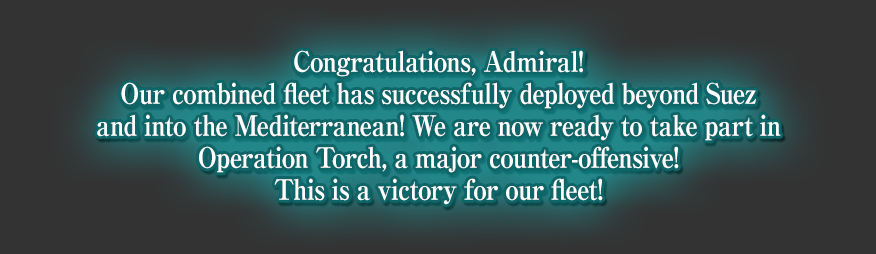
<style>
.page{position:relative;width:876px;height:254px;background:#333333}
.page>*{position:absolute;margin:0}
.t1{font:28px/32px "RyuminPro-ExBold";letter-spacing:-0.04em;color:#ffffff;scale:0.9 1}
</style>
<div class="page">
<p class="t1" style="left:97px;top:50px;width:684px;height:155px;text-align:center">Congratulations, Admiral!<br>Our combined fleet has successfully deployed beyond Suez<br>and into the Mediterranean! We are now ready to take part in<br>Operation Torch, a major counter-offensive!<br>This is a victory for our fleet!</p>
</div>
